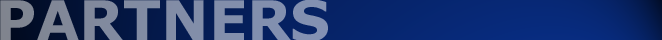
<style>
.page{position:relative;width:662px;height:40px}
.page>*{position:absolute;margin:0}
.t1{font:56px "Verdana-Bold";letter-spacing:-0.005em;color:#828da6}
</style>
<div class="page">
<p class="t1" style="left:0px;top:0px;width:328px;height:42px">PARTNERS</p>
</div>
